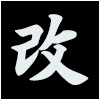
<style>
.page{position:relative;width:100px;height:100px;background:#000000}
.page>*{position:absolute;margin:0}
.t1{font:80px "HakusyuKaisyoExtraBold_kk";letter-spacing:0.1em;color:#e6eeef;font-weight:bold}
</style>
<div class="page">
<p class="t1" style="left:11px;top:14px;width:78px;height:71px">改</p>
</div>
